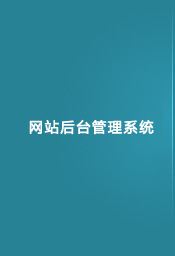
<style>
.page{position:relative;width:175px;height:256px;background:#278296}
.page>*{position:absolute;margin:0}
.t1{font:14px "MicrosoftYaHei";letter-spacing:0.1em;color:#ffffff;font-weight:bold}
</style>
<div class="page">
<p class="t1" style="left:29px;top:119px;width:125px;height:16px">网站后台管理系统</p>
</div>
